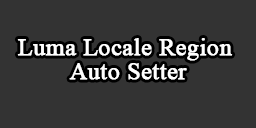
<style>
.page{position:relative;width:256px;height:128px;background:#333333}
.page>*{position:absolute;margin:0}
.t1{font:24px/6px "TimesNewRomanPSMT";color:#ffffff;font-weight:bold}
</style>
<div class="page">
<p class="t1" style="left:17px;top:38px;width:216px;height:42px;text-align:center">Luma Locale Region <br><br><br><br>Auto Setter</p>
</div>
